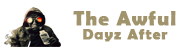
<style>
.page{position:relative;width:192px;height:51px;background:#ffffff}
.page>*{position:absolute;margin:0}
.t1{font:19.7px "BerlinSansFBDemi-Bold";letter-spacing:0.06em;color:#a1946d;font-weight:bold}
.t2{font:15px "BerlinSansFBDemi-Bold";letter-spacing:0.06em;color:#a1946d;font-weight:bold}
</style>
<div class="page">
<p class="t1" style="left:73px;top:11px;width:103px;height:15px">The Awful</p>
<p class="t2" style="left:83px;top:29px;width:85px;height:13px">Dayz After</p>
</div>
